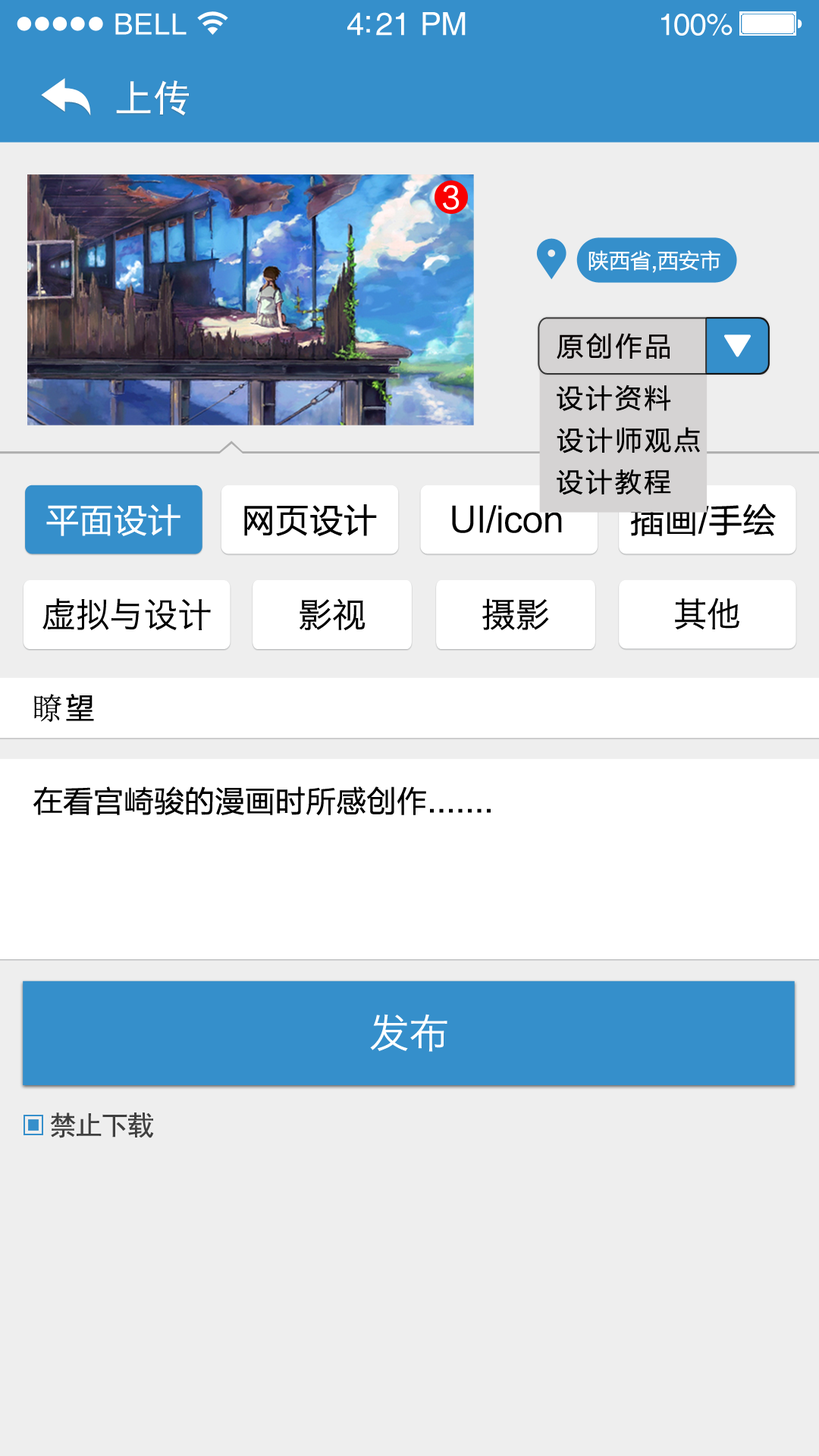
<style>
.page{position:relative;width:819px;height:1456px;background:#eeeeee}
.page>*{position:absolute;margin:0}
.t1{font:29.3px "Helvetica";letter-spacing:0.02em;color:#ffffff}
.t2{font:31.8px "Helvetica";letter-spacing:-0.02em;color:#ffffff}
.t3{font:30.6px "Helvetica";letter-spacing:-0.02em;color:#ffffff}
.t4{font:37.9px "SimHei";letter-spacing:0.025em;color:#ffffff}
.t5{font:30.3px "FZLTHJW--GB1-0";color:#ffffff}
.t6{font:21.2px "FZLTHJW--GB1-0";color:#ffffff}
.t7{font:27.3px "FZLTHJW--GB1-0";letter-spacing:0.075em;color:#060000}
.t8{font:27.3px "FZLTHJW--GB1-0";letter-spacing:0.075em;color:#000000}
.t9{font:34.1px "FZLTHJW--GB1-0";color:#ffffff}
.t10{font:34.1px "FZLTHJW--GB1-0";color:#000000}
.t11{font:34.1px "HiraginoSansGB-W3";color:#000000}
.t12{font:30.3px "SimSun";letter-spacing:0.075em;color:#000000}
.t13{font:30.3px "FZLTHJW--GB1-0";letter-spacing:0.075em;color:#000000}
.t14{font:30.3px "FZLTHJW--GB1-0";color:#000000}
.t15{font:40.2px "HiraginoSansGB-W3";color:#ffffff}
.t16{font:27.3px "SimHei";letter-spacing:-0.05em;color:#404040}
</style>
<div class="page">
<p class="t1" style="left:115px;top:13px;width:72px;height:22px">BELL</p>
<p class="t2" style="left:347px;top:12px;width:119px;height:24px">4:21 PM</p>
<p class="t3" style="left:661px;top:14px;width:72px;height:22px">100%</p>
<p class="t4" style="left:116px;top:80px;width:73px;height:36px">上传</p>
<p class="t5" style="left:443px;top:185px;width:17px;height:25px">3</p>
<p class="t6" style="left:588px;top:250px;width:132px;height:23px">陕西省,西安市</p>
<p class="t7" style="left:557px;top:333px;width:113px;height:26px">原创作品</p>
<p class="t8" style="left:557px;top:384px;width:114px;height:27px">设计资料</p>
<p class="t8" style="left:557px;top:427px;width:143px;height:26px">设计师观点</p>
<p class="t8" style="left:557px;top:469px;width:114px;height:26px">设计教程</p>
<p class="t9" style="left:46px;top:504px;width:134px;height:32px">平面设计</p>
<p class="t10" style="left:244px;top:504px;width:133px;height:32px">网页设计</p>
<p class="t10" style="left:452px;top:505px;width:110px;height:28px">UI/icon</p>
<p class="t10" style="left:631px;top:504px;width:145px;height:32px">插画/手绘</p>
<p class="t11" style="left:42px;top:598px;width:169px;height:32px">虚拟与设计</p>
<p class="t11" style="left:300px;top:598px;width:66px;height:33px">影视</p>
<p class="t11" style="left:482px;top:598px;width:67px;height:32px">摄影</p>
<p class="t11" style="left:675px;top:598px;width:64px;height:31px">其他</p>
<p class="t12" style="left:34px;top:694px;width:60px;height:28px">瞭<span class="t13">望</span></p>
<p class="t14" style="left:33px;top:786px;width:458px;height:29px">在看宫崎骏的漫画时所感创作.......</p>
<p class="t15" style="left:370px;top:1014px;width:77px;height:38px">发布</p>
<p class="t16" style="left:50px;top:1112px;width:104px;height:26px">禁止下载</p>
</div>
